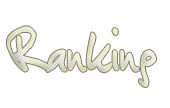
<style>
.page{position:relative;width:170px;height:108px;background:#ffffff}
.page>*{position:absolute;margin:0}
.t1{font:80px "Christopherhand";font-weight:bold;scale:0.8 1}
</style>
<div class="page">
<p class="t1" style="left:7px;top:26px;width:149px;height:61px">Ranking</p>
</div>
